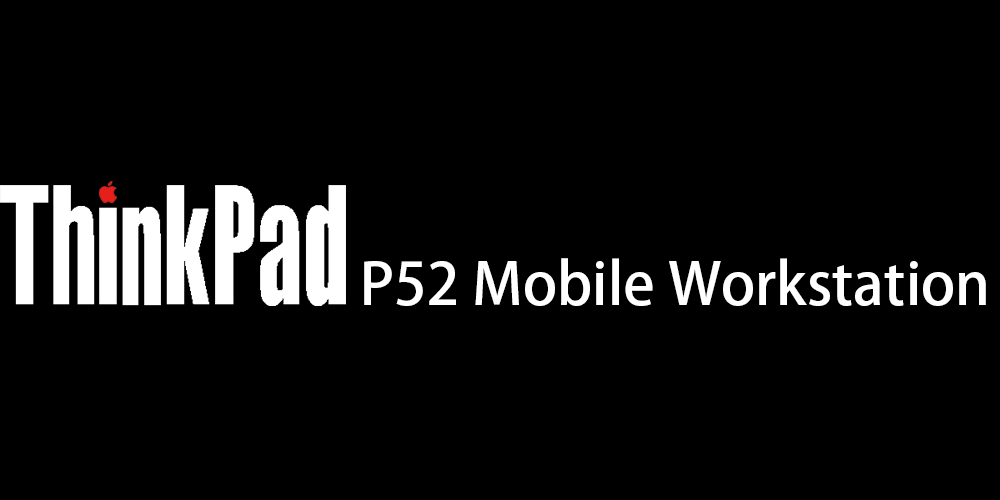
<style>
.page{position:relative;width:1000px;height:500px;background:#000000}
.page>*{position:absolute;margin:0}
.t1{font:58px "AdobeHeitiStd-Regular";color:#ffffff}
</style>
<div class="page">
<p class="t1" style="left:364px;top:258px;width:622px;height:48px">P52 Mobile Workstation</p>
</div>
